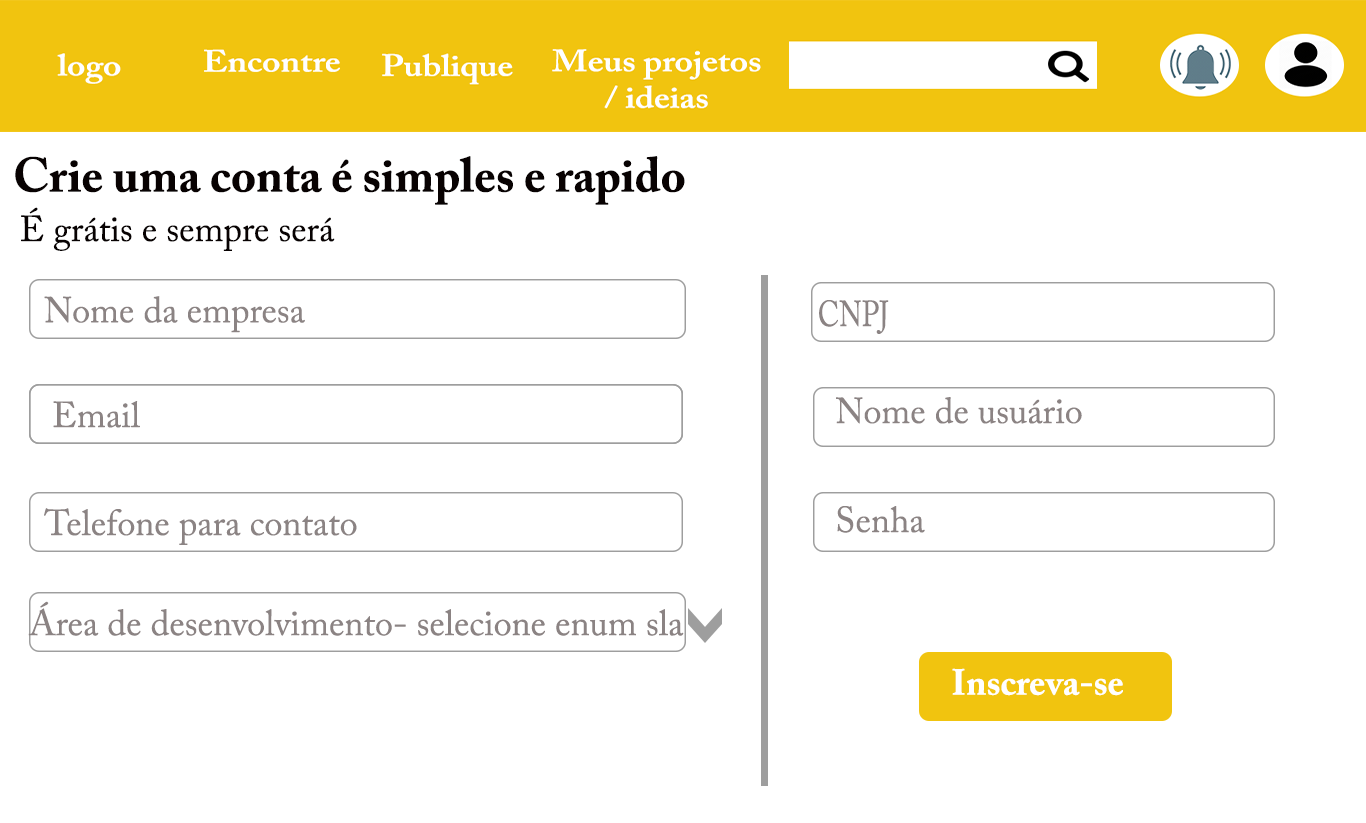
<style>
.page{position:relative;width:1366px;height:823px;background:#ffffff}
.page>*{position:absolute;margin:0}
.t1{font:48px "ACaslonPro-Bold";color:#080202}
.t2{font:36px "ACaslonPro-Regular";color:#080202}
.t3{font:36px "ACaslonPro-Regular";color:#8b8383}
.t4{font:36px "ACaslonPro-Regular";color:#8b8383;scale:0.79 1}
.t5{font:36px "ACaslonPro-Bold";color:#ffffff}
</style>
<div class="page">
<p class="t1" style="left:15px;top:156px;width:670px;height:49px">Crie uma conta é simples e rapido</p>
<p class="t2" style="left:21px;top:207px;width:314px;height:44px">É grátis e sempre será</p>
<p class="t3" style="left:44px;top:296px;width:261px;height:37px">Nome da empresa</p>
<p class="t4" style="left:819px;top:300px;width:70px;height:34px">CNPJ</p>
<p class="t3" style="left:53px;top:401px;width:87px;height:27px">Email</p>
<p class="t3" style="left:836px;top:397px;width:246px;height:27px">Nome de usuário</p>
<p class="t3" style="left:44px;top:508px;width:313px;height:37px">Telefone para contato</p>
<p class="t3" style="left:837px;top:506px;width:88px;height:27px">Senha</p>
<p class="t3" style="left:28px;top:601px;width:656px;height:35px">Área de desenvolvimento- selecione enum sla</p>
<p class="t5" style="left:952px;top:668px;width:171px;height:28px">Inscreva-se</p>
</div>
